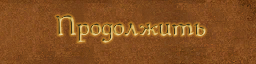
<style>
.page{position:relative;width:256px;height:64px}
.page>*{position:absolute;margin:0}
.t1{font:28px "Magic-Cards-Kollfin-Normal"}
</style>
<div class="page">
<p class="t1" style="left:55px;top:15px;width:151px;height:28px">Продолжить</p>
</div>
